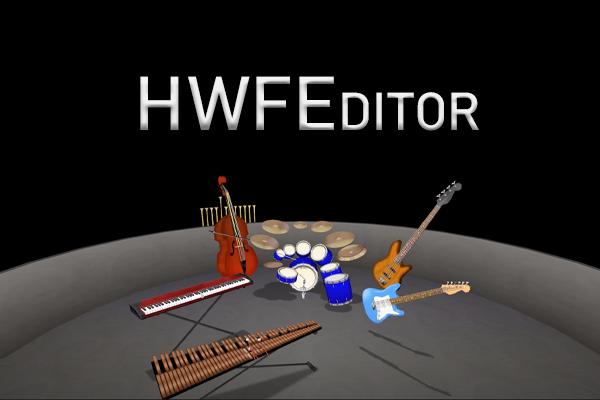
<style>
.page{position:relative;width:600px;height:400px;background:#000000}
.page>*{position:absolute;margin:0}
.t1{font:75px "Bahnschrift";color:#ededed;font-variant:small-caps}
</style>
<div class="page">
<p class="t1" style="left:140px;top:76px;width:339px;height:55px">HWFEditor</p>
</div>
